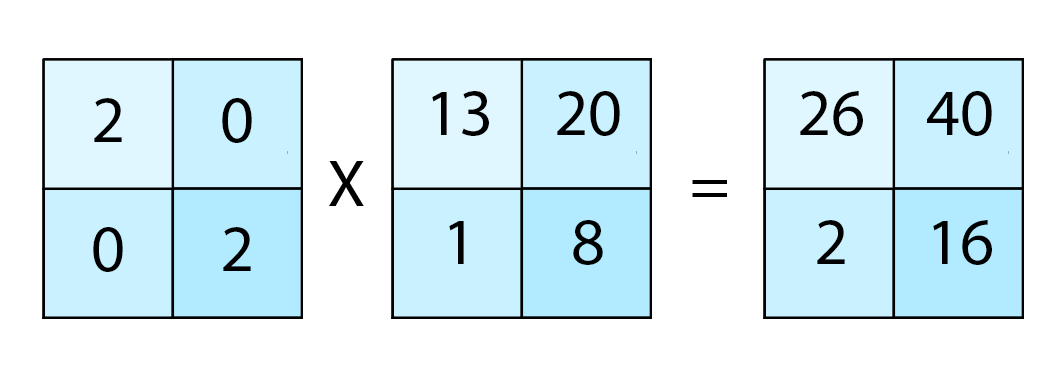
<style>
.page{position:relative;width:1050px;height:375px;background:#ffffff}
.page>*{position:absolute;margin:0}
.t1{font:66.7px "MyriadPro-Regular";color:#000000}
</style>
<div class="page">
<p class="t1" style="left:94px;top:98px;width:28px;height:44px">2</p>
<p class="t1" style="left:222px;top:98px;width:30px;height:45px">0</p>
<p class="t1" style="left:432px;top:91px;width:57px;height:45px">13</p>
<p class="t1" style="left:557px;top:91px;width:63px;height:45px">20</p>
<p class="t1" style="left:800px;top:91px;width:63px;height:45px">26</p>
<p class="t1" style="left:927px;top:91px;width:65px;height:45px">40</p>
<p class="t1" style="left:329px;top:161px;width:35px;height:45px">X</p>
<p class="t1" style="left:692px;top:180px;width:35px;height:17px">=</p>
<p class="t1" style="left:449px;top:221px;width:15px;height:43px">1</p>
<p class="t1" style="left:573px;top:220px;width:30px;height:45px">8</p>
<p class="t1" style="left:817px;top:220px;width:28px;height:44px">2</p>
<p class="t1" style="left:933px;top:220px;width:59px;height:45px">16</p>
<p class="t1" style="left:93px;top:227px;width:30px;height:45px">0</p>
<p class="t1" style="left:223px;top:227px;width:28px;height:44px">2</p>
</div>
